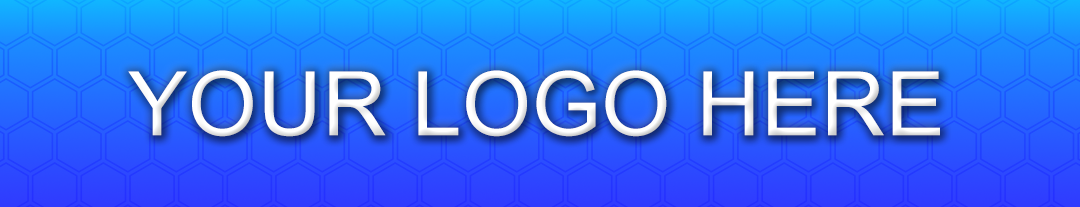
<style>
.page{position:relative;width:1080px;height:207px}
.page>*{position:absolute;margin:0}
.t1{font:89px "ArialMT";letter-spacing:0.005em;color:#ffffff}
</style>
<div class="page">
<p class="t1" style="left:128px;top:70px;width:812px;height:67px">YOUR LOGO HERE</p>
</div>
